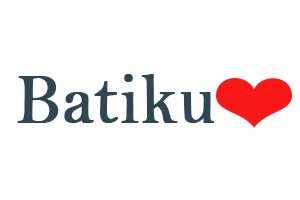
<style>
.page{position:relative;width:300px;height:200px;background:#ffffff}
.page>*{position:absolute;margin:0}
.t1{font:72px "BellMT";color:#2f4752;font-weight:bold}
</style>
<div class="page">
<p class="t1" style="left:17px;top:74px;width:197px;height:49px">Batiku</p>
</div>
